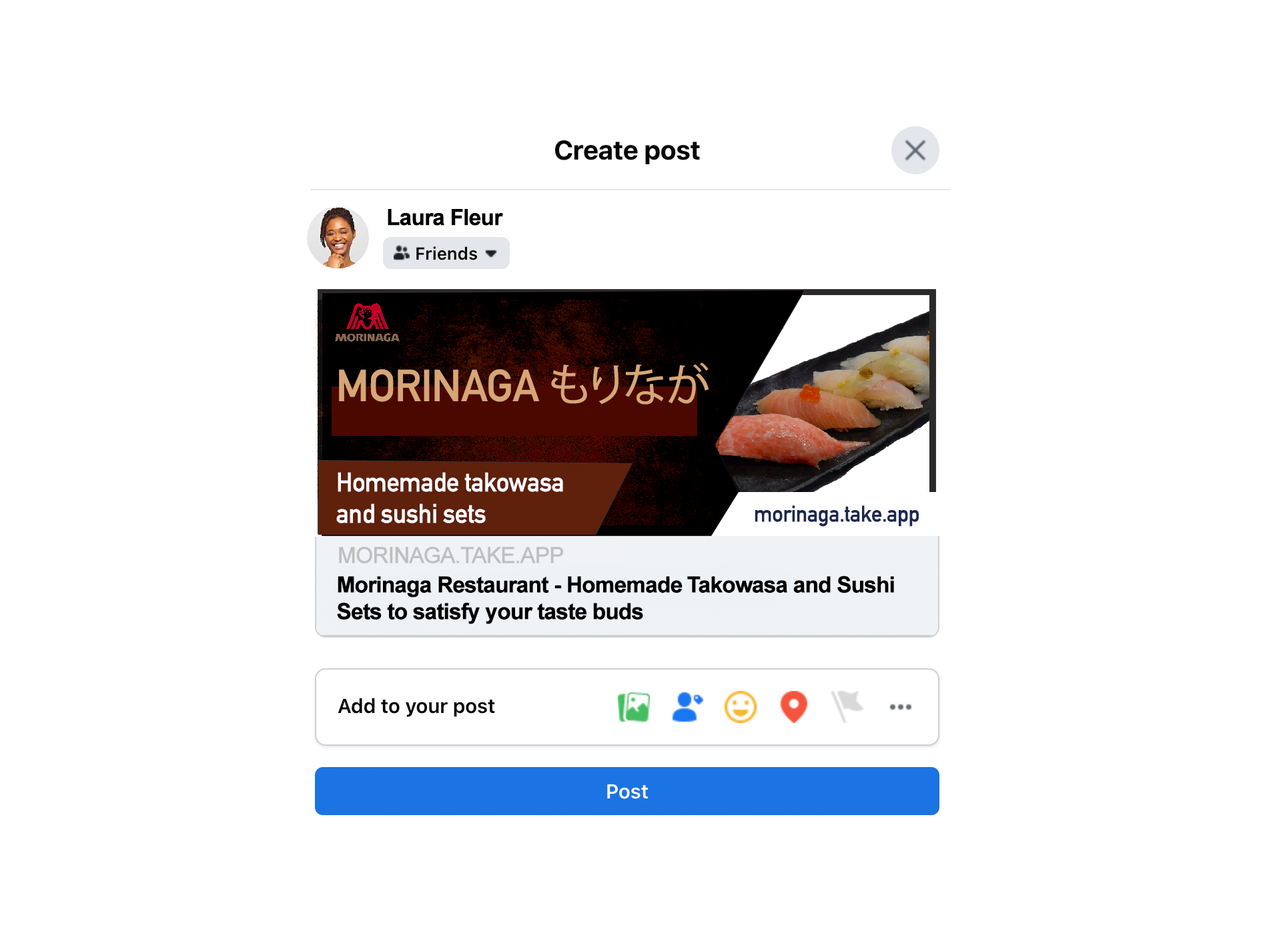
<style>
.page{position:relative;width:1261px;height:946px;background:#ffffff}
.page>*{position:absolute;margin:0}
.t1{font:44.1px "DINAlternate-Bold";letter-spacing:-0.05em;color:#d7a676;font-weight:bold}
.t2{font:44.1px "KozGoPr6N-Regular";letter-spacing:-0.05em;color:#d7a676;font-weight:bold}
.t3{font:26.2px "DINAlternate-Bold";letter-spacing:-0.05em;color:#ffffff;font-weight:bold}
.t4{font:22.2px "DINAlternate-Bold";letter-spacing:-0.05em;color:#1d284e;font-weight:bold}
.t5{font:22.2px "ArialMT";letter-spacing:-0.05em;color:#bfbfbf;font-weight:bold}
.t6{font:22.2px "Arial-BoldMT";letter-spacing:-0.05em;color:#000000;font-weight:bold}
</style>
<div class="page">
<p class="t1" style="left:339px;top:362px;width:370px;height:42px">MORINAGA <span class="t2">もりなが</span></p>
<p class="t3" style="left:336px;top:472px;width:227px;height:51px">Homemade takowasa<br>and sushi sets</p>
<p class="t4" style="left:755px;top:505px;width:164px;height:21px">morinaga.take.app</p>
<p class="t5" style="left:339px;top:546px;width:225px;height:17px">MORINAGA.TAKE.APP</p>
<p class="t6" style="left:337px;top:575px;width:557px;height:49px">Morinaga Restaurant - Homemade Takowasa and Sushi<br>Sets to satisfy your taste buds</p>
</div>
